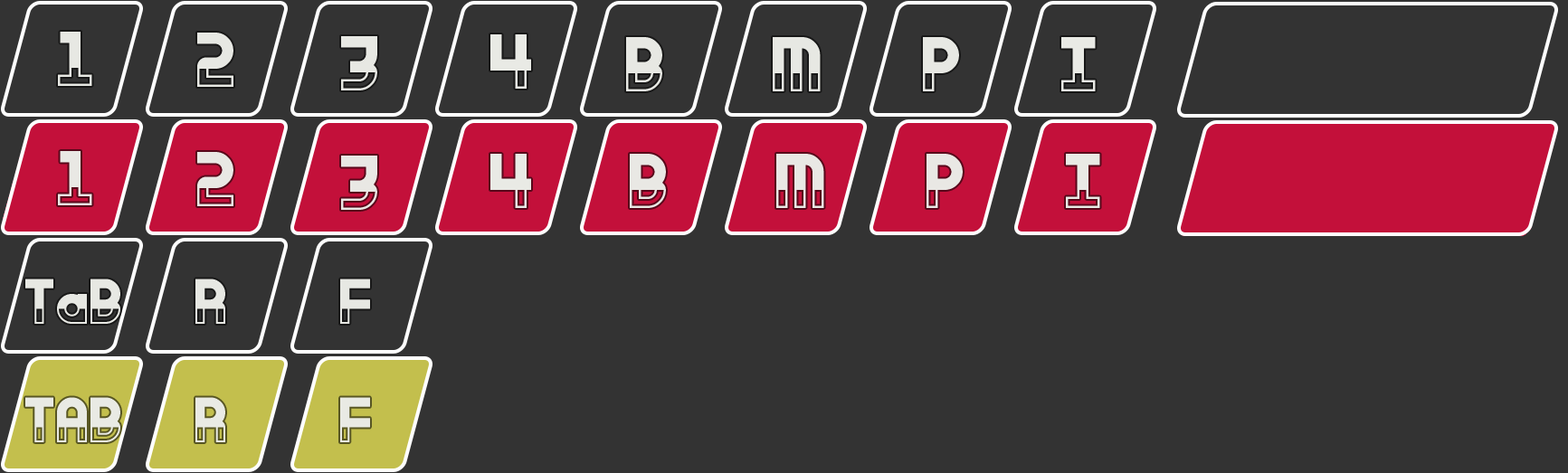
<style>
.page{position:relative;width:1568px;height:473px;background:#333333}
.page>*{position:absolute;margin:0}
.t1{font:90.5px "Eviolite";color:#e9eae5}
.t2{font:74.8px "Eviolite";color:#e9eae5}
</style>
<div class="page">
<p class="t1" style="left:58px;top:32px;width:34px;height:54px">1</p>
<p class="t1" style="left:197px;top:33px;width:36px;height:54px">2</p>
<p class="t1" style="left:341px;top:36px;width:36px;height:54px">3</p>
<p class="t1" style="left:490px;top:34px;width:41px;height:55px">4</p>
<p class="t1" style="left:626px;top:37px;width:36px;height:54px">B</p>
<p class="t1" style="left:773px;top:37px;width:48px;height:54px">M</p>
<p class="t1" style="left:923px;top:37px;width:36px;height:54px">P</p>
<p class="t1" style="left:1061px;top:37px;width:35px;height:54px">I</p>
<p class="t1" style="left:58px;top:151px;width:34px;height:54px">1</p>
<p class="t1" style="left:197px;top:152px;width:36px;height:54px">2</p>
<p class="t1" style="left:341px;top:156px;width:36px;height:54px">3</p>
<p class="t1" style="left:490px;top:154px;width:41px;height:54px">4</p>
<p class="t1" style="left:630px;top:154px;width:36px;height:54px">B</p>
<p class="t1" style="left:776px;top:154px;width:48px;height:54px">M</p>
<p class="t1" style="left:927px;top:154px;width:36px;height:54px">P</p>
<p class="t1" style="left:1066px;top:154px;width:34px;height:54px">I</p>
<p class="t2" style="left:25px;top:279px;width:95px;height:45px">TaB</p>
<p class="t2" style="left:195px;top:279px;width:30px;height:45px">R</p>
<p class="t2" style="left:340px;top:279px;width:30px;height:45px">F</p>
<p class="t2" style="left:25px;top:397px;width:95px;height:45px">TAB</p>
<p class="t2" style="left:195px;top:397px;width:30px;height:45px">R</p>
<p class="t2" style="left:340px;top:397px;width:30px;height:45px">F</p>
</div>
